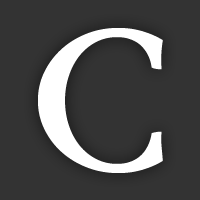
<style>
.page{position:relative;width:200px;height:200px;background:#333333}
.page>*{position:absolute;margin:0}
.t1{font:215px "Ingleby-Bold";letter-spacing:-0.075em;color:#ffffff}
</style>
<div class="page">
<p class="t1" style="left:38px;top:28px;width:125px;height:145px">C</p>
</div>
